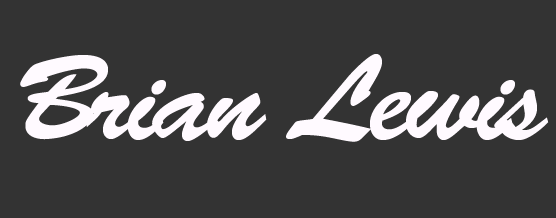
<style>
.page{position:relative;width:556px;height:218px;background:#333333}
.page>*{position:absolute;margin:0}
.t1{font:120px "BrushScriptStd";letter-spacing:-0.05em;color:#fffaff}
</style>
<div class="page">
<p class="t1" style="left:20px;top:54px;width:529px;height:88px">Brian Lewis</p>
</div>
